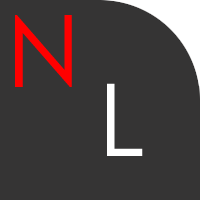
<style>
.page{position:relative;width:200px;height:200px;background:#353434}
.page>*{position:absolute;margin:0}
.t1{font:100px "CenturyGothic";letter-spacing:0.025em;color:#ff0000}
.t2{font:100px "CenturyGothic";letter-spacing:0.025em;color:#ffffff}
</style>
<div class="page">
<p class="t1" style="left:15px;top:15px;width:57px;height:72px">N</p>
<p class="t2" style="left:107px;top:83px;width:36px;height:73px">L</p>
</div>
